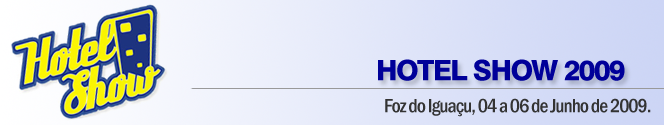
<style>
.page{position:relative;width:664px;height:125px}
.page>*{position:absolute;margin:0}
.t1{font:28px "Swiss721BT-Heavy";letter-spacing:-0.05em;color:#000099;text-transform:uppercase}
.t2{font:20px "FranklinGothic-MediumCond";letter-spacing:-0.05em;color:#333333}
</style>
<div class="page">
<p class="t1" style="left:378px;top:59px;width:247px;height:22px">HOTEL SHOW 2009</p>
<p class="t2" style="left:385px;top:98px;width:266px;height:19px">Foz do Iguaçu, 04 a 06 de Junho de 2009.</p>
</div>
